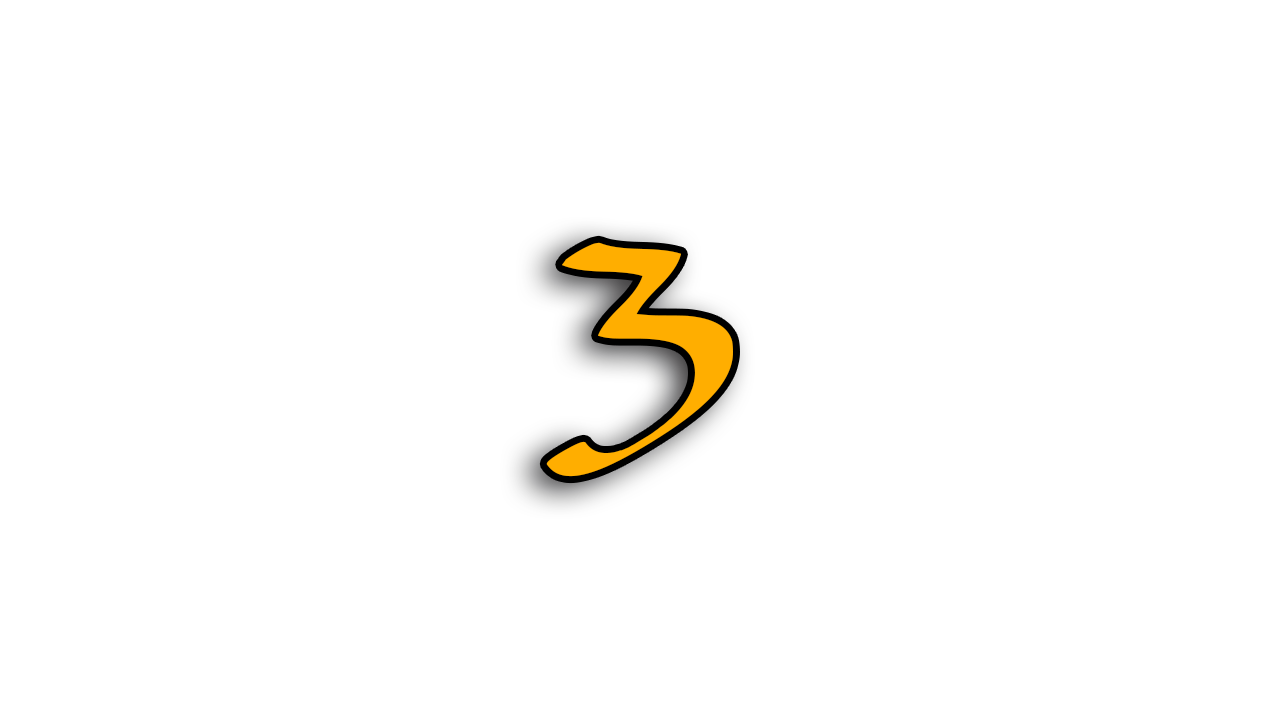
<style>
.page{position:relative;width:1280px;height:720px;background:#ffffff}
.page>*{position:absolute;margin:0}
.t1{font:300px "MESTIZOSUNIDOS-URBANHOOKUPZ";letter-spacing:0.18em;color:#ffae00}
</style>
<div class="page">
<p class="t1" style="left:546px;top:242px;width:187px;height:235px">3</p>
</div>
